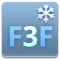
<style>
.page{position:relative;width:60px;height:60px}
.page>*{position:absolute;margin:0}
.t1{font:28px "DroidSans-Bold"}
</style>
<div class="page">
<p class="t1" style="left:9px;top:26px;width:44px;height:21px">F3F</p>
</div>
